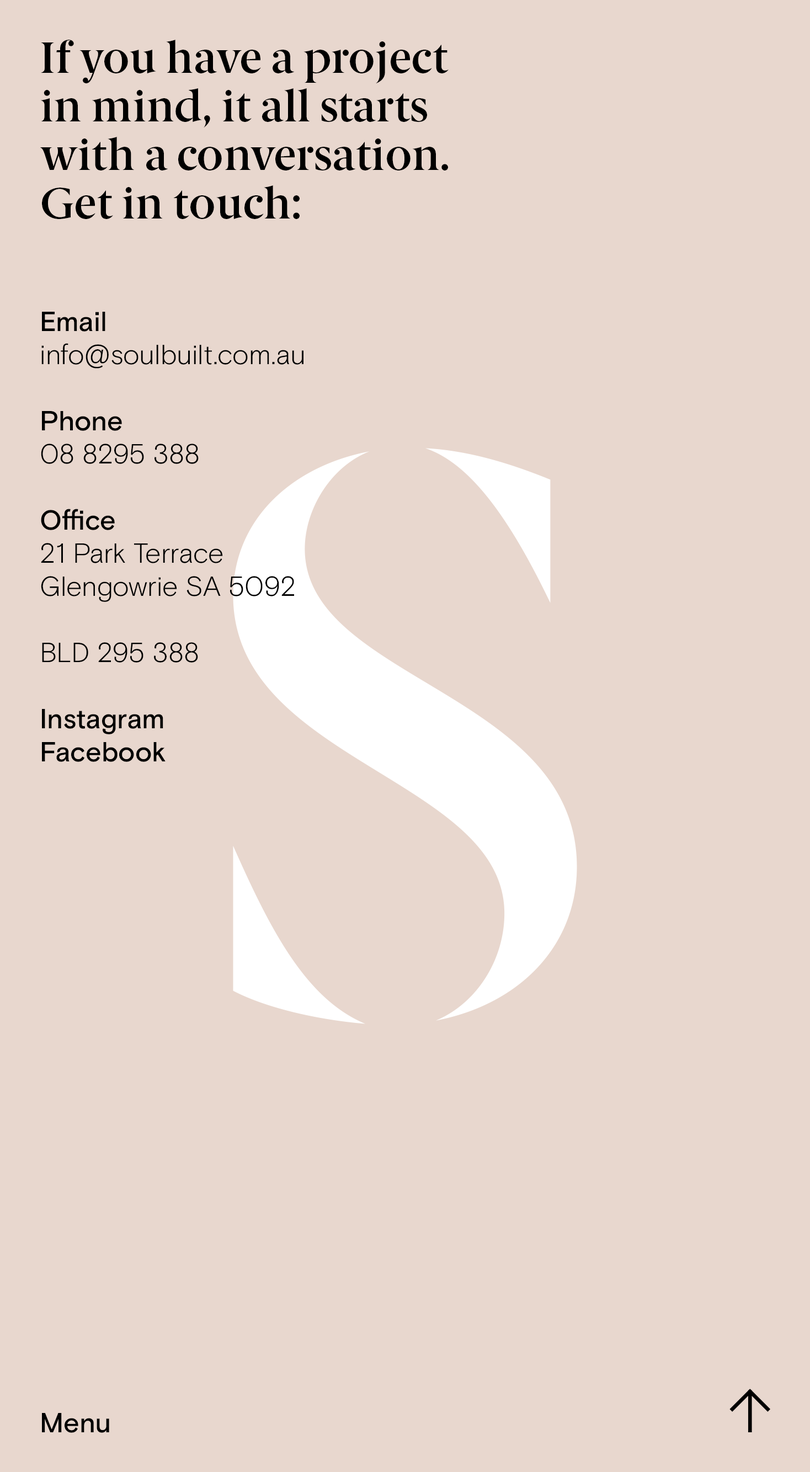
<style>
.page{position:relative;width:810px;height:1472px;background:#e8d7ce}
.page>*{position:absolute;margin:0}
.t1{font:44.1px "BerlingskeSerif-DemiBold";color:#000000}
.t2{font:44.1px "BerlingskeSerif-DemiBold";letter-spacing:-0.039em;color:#000000}
.t3{font:44.1px "BerlingskeSerif-DemiBold";letter-spacing:-0.03em;color:#000000}
.t4{font:44.1px "BerlingskeSerif-DemiBold";letter-spacing:-0.049em;color:#000000}
.t5{font:44.1px "BerlingskeSerif-DemiBold";letter-spacing:-0.02em;color:#000000}
.t6{font:44.1px "BerlingskeSerif-DemiBold";letter-spacing:-0.05em;color:#000000}
.t7{font:44.1px "BerlingskeSerif-DemiBold";letter-spacing:-0.009em;color:#000000}
.t8{font:27.6px "BasisGrotesquePro-Medium";color:#000000}
.t9{font:27.6px "BasisGrotesquePro-Medium";letter-spacing:-0.023em;color:#000000}
.t10{font:27.6px "BasisGrotesquePro-Medium";letter-spacing:-0.01em;color:#000000}
.t11{font:27.6px "BasisGrotesquePro-Light";color:#000000}
.t12{font:27.6px "BasisGrotesquePro-Light";letter-spacing:-0.027em;color:#000000}
.t13{font:27.6px "BasisGrotesquePro-Light";letter-spacing:-0.022em;color:#000000}
.t14{font:27.6px "BasisGrotesquePro-Light";letter-spacing:-0.006em;color:#000000}
.t15{font:27.6px "BasisGrotesquePro-Light";letter-spacing:-0.008em;color:#000000}
.t16{font:27.6px "BasisGrotesquePro-Light";letter-spacing:-0.007em;color:#000000}
.t17{font:27.6px "BasisGrotesquePro-Light";letter-spacing:-0.009em;color:#000000}
.t18{font:27.6px "BasisGrotesquePro-Light";letter-spacing:-0.01em;color:#000000}
.t19{font:27.6px "BasisGrotesquePro-Medium";letter-spacing:-0.017em;color:#000000}
.t20{font:27.6px "BasisGrotesquePro-Medium";letter-spacing:-0.004em;color:#000000}
.t21{font:27.6px "BasisGrotesquePro-Medium";letter-spacing:-0.005em;color:#000000}
.t22{font:27.6px "BasisGrotesquePro-Light";letter-spacing:-0.042em;color:#000000}
.t23{font:27.6px "BasisGrotesquePro-Medium";letter-spacing:-0.006em;color:#000000}
.t24{font:27.6px "BasisGrotesquePro-Light";letter-spacing:-0.056em;color:#000000}
.t25{font:27.6px "BasisGrotesquePro-Light";letter-spacing:-0.112em;color:#000000}
.t26{font:27.6px "BasisGrotesquePro-Light";letter-spacing:-0.005em;color:#000000}
.t27{font:27.6px "BasisGrotesquePro-Light";letter-spacing:-0.012em;color:#000000}
.t28{font:27.6px "BasisGrotesquePro-Light";letter-spacing:-0.013em;color:#000000}
.t29{font:27.6px "BasisGrotesquePro-Light";letter-spacing:-0.016em;color:#000000}
.t30{font:27.6px "BasisGrotesquePro-Light";letter-spacing:-0.028em;color:#000000}
.t31{font:27.6px "BasisGrotesquePro-Light";letter-spacing:-0.043em;color:#000000}
.t32{font:27.6px "BasisGrotesquePro-Medium";letter-spacing:-0.009em;color:#000000}
.t33{font:27.6px "BasisGrotesquePro-Medium";letter-spacing:-0.007em;color:#000000}
.t34{font:27.6px "BasisGrotesquePro-Medium";letter-spacing:-0.022em;color:#000000}
.t35{font:27.6px "BasisGrotesquePro-Medium";letter-spacing:-0.015em;color:#000000}
.t36{font:27.6px "BasisGrotesquePro-Medium";letter-spacing:-0.048em;color:#000000}
</style>
<div class="page">
<p class="t1" style="left:41px;top:40px;width:408px;height:43px">If <span class="t2">y</span>ou h<span class="t3">a</span><span class="t4">v</span>e a p<span class="t5">r</span>oject</p>
<p class="t1" style="left:41px;top:88px;width:386px;height:39px">in mind, it all <span class="t3">s</span>tarts</p>
<p class="t1" style="left:40px;top:137px;width:408px;height:33px"><span class="t5">w</span>ith a <span class="t5">c</span>o<span class="t2">n</span><span class="t6">v</span>e<span class="t7">r</span>sation.</p>
<p class="t1" style="left:42px;top:185px;width:258px;height:34px">Get in touch:</p>
<p class="t8" style="left:42px;top:312px;width:63px;height:20px"><span class="t9">E</span><span class="t10">m</span>ail</p>
<p class="t11" style="left:41px;top:343px;width:262px;height:26px">i<span class="t12">n</span><span class="t13">f</span>o@<span class="t14">s</span><span class="t15">o</span>ul<span class="t16">b</span>uilt.<span class="t17">c</span>om.<span class="t18">a</span>u</p>
<p class="t19" style="left:42px;top:411px;width:80px;height:20px">P<span class="t20">h</span><span class="t8">o</span><span class="t21">n</span><span class="t8">e</span></p>
<p class="t11" style="left:41px;top:444px;width:158px;height:20px">08 8<span class="t22">2</span>95 388</p>
<p class="t8" style="left:41px;top:509px;width:74px;height:21px">O<span class="t20">ﬃ</span><span class="t23">c</span>e</p>
<p class="t11" style="left:41px;top:543px;width:182px;height:20px">21 <span class="t24">P</span><span class="t18">a</span>rk <span class="t25">T</span>er<span class="t13">r</span><span class="t26">a</span><span class="t15">c</span>e</p>
<p class="t11" style="left:41px;top:576px;width:253px;height:26px">Gle<span class="t27">n</span>g<span class="t28">o</span>wr<span class="t14">i</span>e SA 5092</p>
<p class="t11" style="left:42px;top:642px;width:156px;height:21px"><span class="t29">B</span><span class="t30">L</span>D <span class="t31">2</span>95 388</p>
<p class="t8" style="left:42px;top:709px;width:121px;height:25px">I<span class="t9">n</span><span class="t32">s</span><span class="t33">t</span><span class="t21">a</span>g<span class="t34">r</span><span class="t35">a</span>m</p>
<p class="t8" style="left:42px;top:742px;width:124px;height:20px"><span class="t36">F</span><span class="t23">ac</span>ebook</p>
<p class="t33" style="left:42px;top:1413px;width:67px;height:20px">M<span class="t8">e</span><span class="t32">n</span><span class="t8">u</span></p>
</div>
